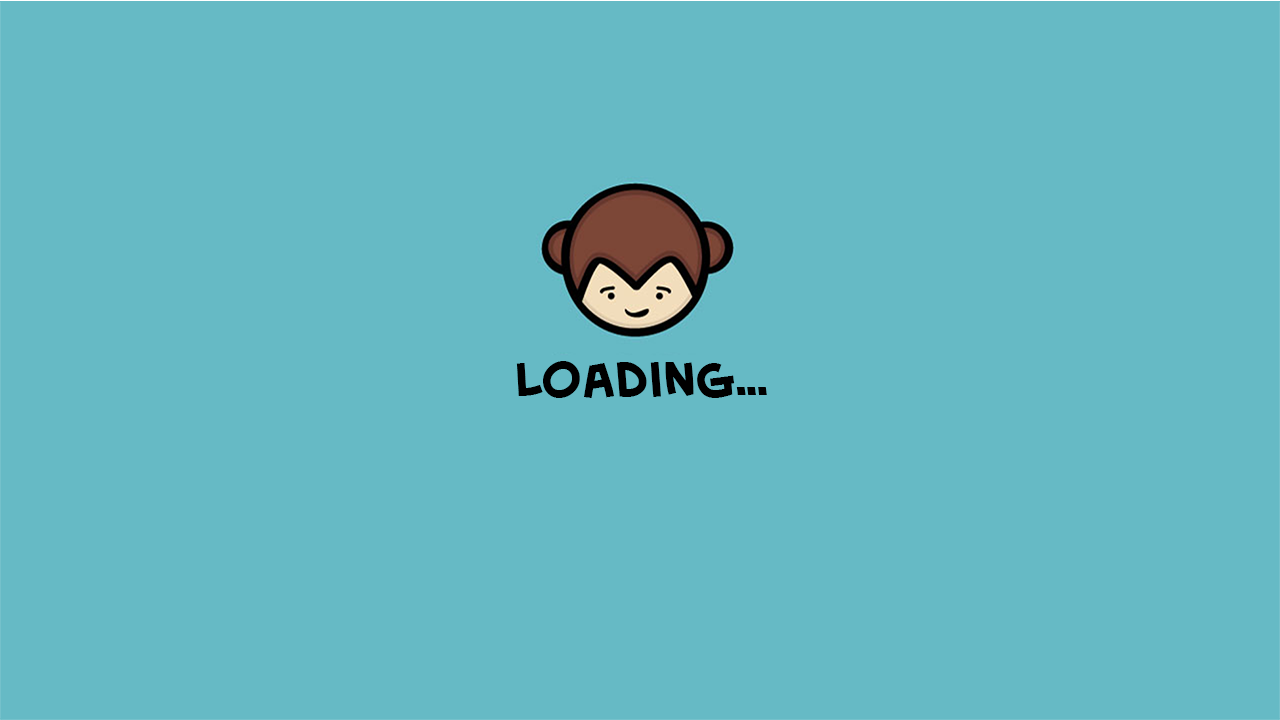
<style>
.page{position:relative;width:1280px;height:720px;background:#66bac5}
.page>*{position:absolute;margin:0}
.t1{font:48px "CreativeBlockBBBold";color:#000000}
</style>
<div class="page">
<p class="t1" style="left:516px;top:361px;width:251px;height:37px">Loading…</p>
</div>
